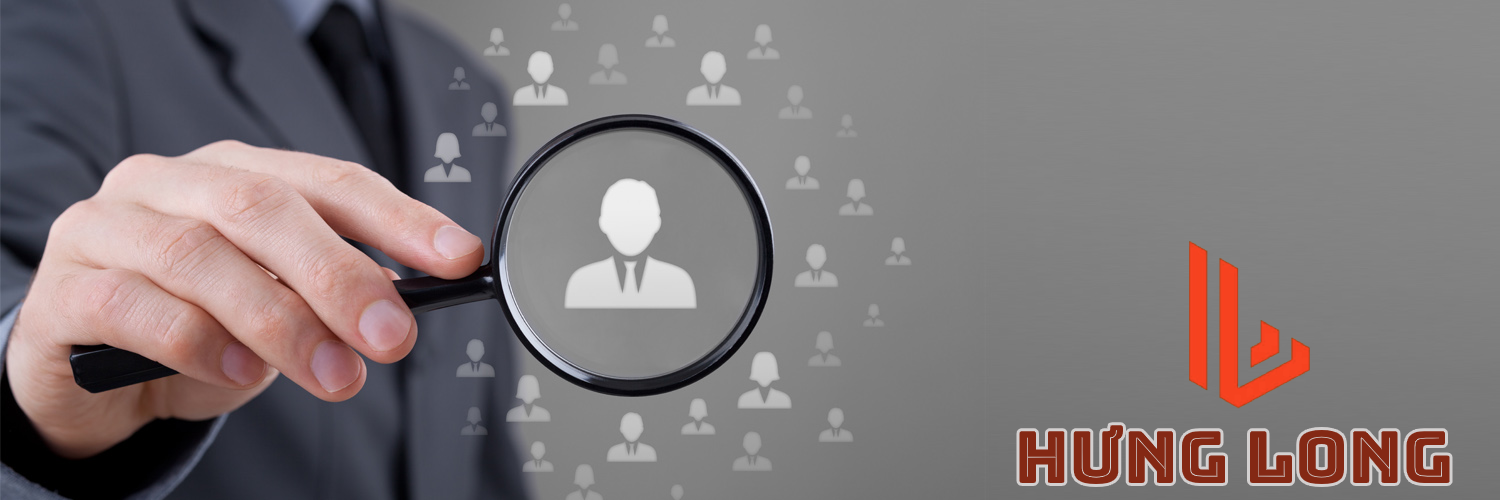
<style>
.page{position:relative;width:1500px;height:500px}
.page>*{position:absolute;margin:0}
.t1{font:72px "Bungee-Inline";color:#842814}
</style>
<div class="page">
<p class="t1" style="left:1019px;top:425px;width:431px;height:60px">HƯNG LONG</p>
</div>
